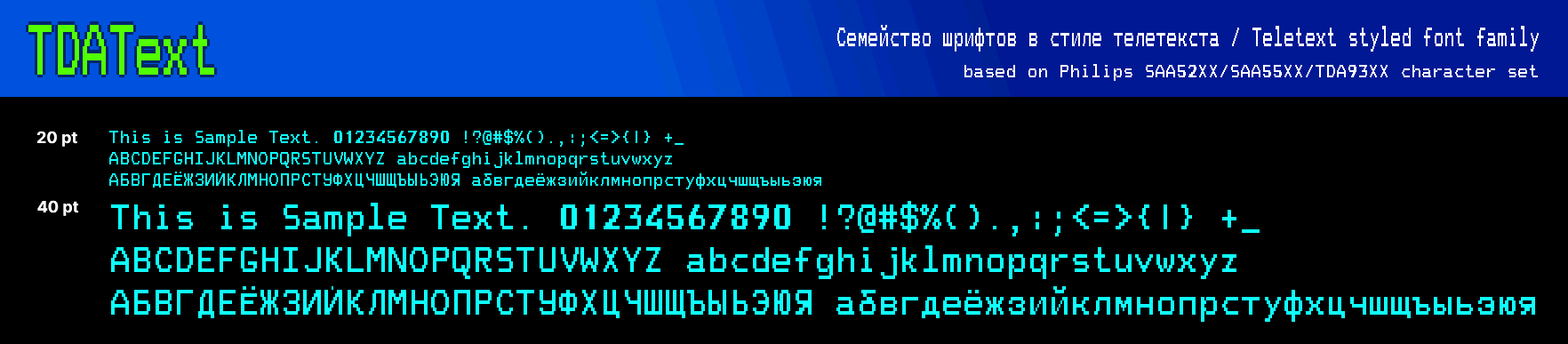
<style>
.page{position:relative;width:1568px;height:344px;background:#000000}
.page>*{position:absolute;margin:0}
.t1{font:71.1px "TDATextCondensed";letter-spacing:-0.02em;color:#51ff00}
.t2{font:26.7px "TDATextCondensed";color:#ffffff}
.t3{font:17.8px "TDAText";color:#ffffff}
.t4{font:16px "Inter-Bold";color:#ffffff}
.t5{font:17.8px "TDAText";color:#0fffff}
.t6{font:35.6px "TDAText";color:#0fffff}
</style>
<div class="page">
<p class="t1" style="left:28px;top:25px;width:186px;height:50px">TDAText</p>
<p class="t2" style="left:837px;top:25px;width:702px;height:27px">Семейство шрифтов в стиле телетекста / Teletext-styled font family</p>
<p class="t3" style="left:964px;top:64px;width:574px;height:17px">based on Philips SAA52XX/SAA55XX/TDA93XX character set</p>
<p class="t4" style="left:37px;top:131px;width:40px;height:16px">20 pt</p>
<p class="t5" style="left:109px;top:129px;width:712px;height:60px">This is Sample Text. 01234567890 !?@#$%().,:;&lt;=&gt;{|}-+_<br>ABCDEFGHIJKLMNOPQRSTUVWXYZ abcdefghijklmnopqrstuvwxyz<br>АБВГДЕЁЖЗИЙКЛМНОПРСТУФХЦЧШЩЪЫЬЭЮЯ абвгдеёжзийклмнопрстуфхцчшщъыьэюя</p>
<p class="t4" style="left:37px;top:200px;width:42px;height:16px">40 pt</p>
<p class="t6" style="left:111px;top:201px;width:1424px;height:121px">This is Sample Text. 01234567890 !?@#$%().,:;&lt;=&gt;{|}-+_<br>ABCDEFGHIJKLMNOPQRSTUVWXYZ abcdefghijklmnopqrstuvwxyz<br>АБВГДЕЁЖЗИЙКЛМНОПРСТУФХЦЧШЩЪЫЬЭЮЯ абвгдеёжзийклмнопрстуфхцчшщъыьэюя</p>
</div>
